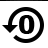
<style>
.page{position:relative;width:48px;height:48px;background:#ffffff}
.page>*{position:absolute;margin:0}
.t1{font:26px "Arial-Black";color:#000000}
</style>
<div class="page">
<p class="t1" style="left:19px;top:14px;width:16px;height:19px">0</p>
</div>
